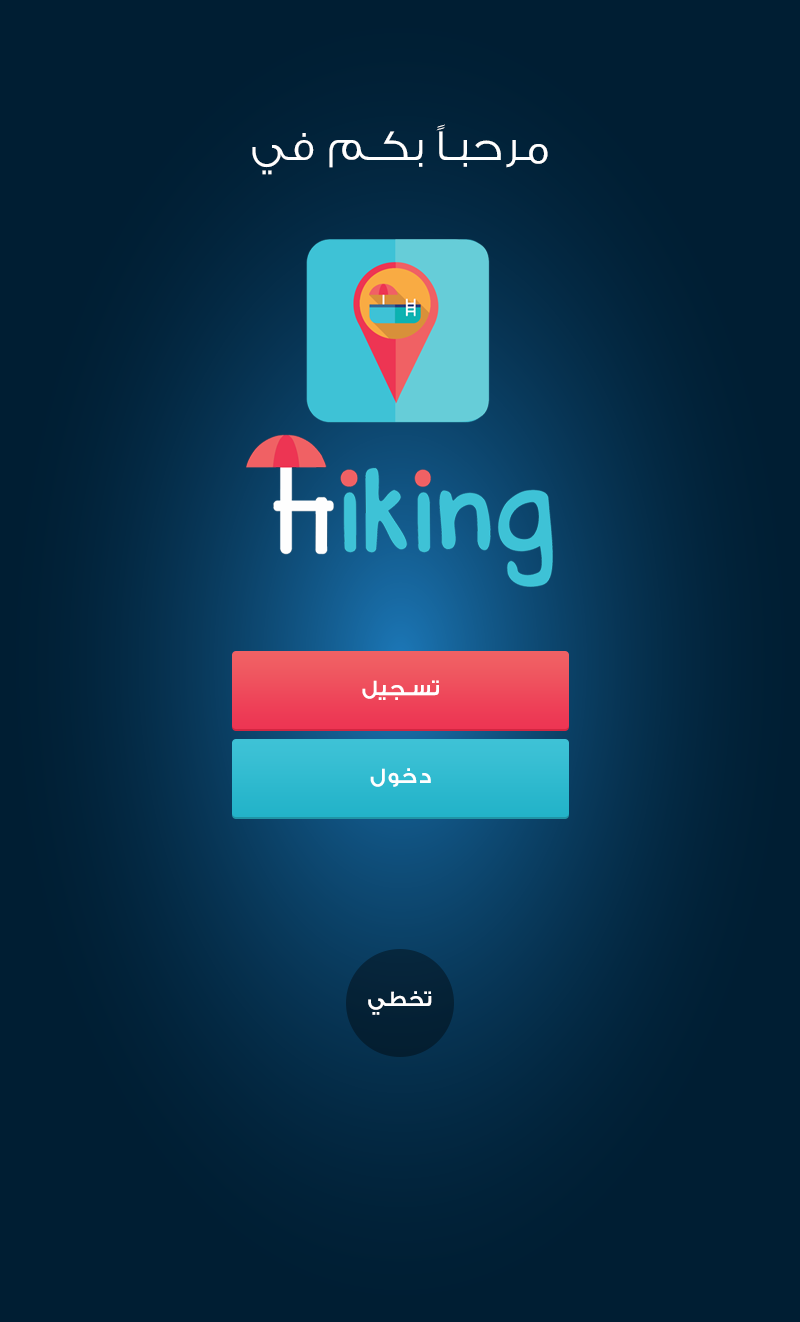
<style>
.page{position:relative;width:800px;height:1322px;background:#001e33}
.page>*{position:absolute;margin:0}
.t1{font:44px "GESSTwoLight-Light";letter-spacing:0.06em;color:#ffffff}
.t2{font:22px "GESSTwoMedium-Medium";letter-spacing:0.06em;color:#ffffff}
</style>
<div class="page">
<p class="t1" style="left:252px;top:124px;width:296px;height:51px">مرحباً بكم في</p>
<p class="t2" style="left:362px;top:680px;width:77px;height:20px">تسجيل</p>
<p class="t2" style="left:370px;top:768px;width:61px;height:19px">دخول</p>
<p class="t2" style="left:368px;top:991px;width:64px;height:24px">تخطي</p>
</div>
